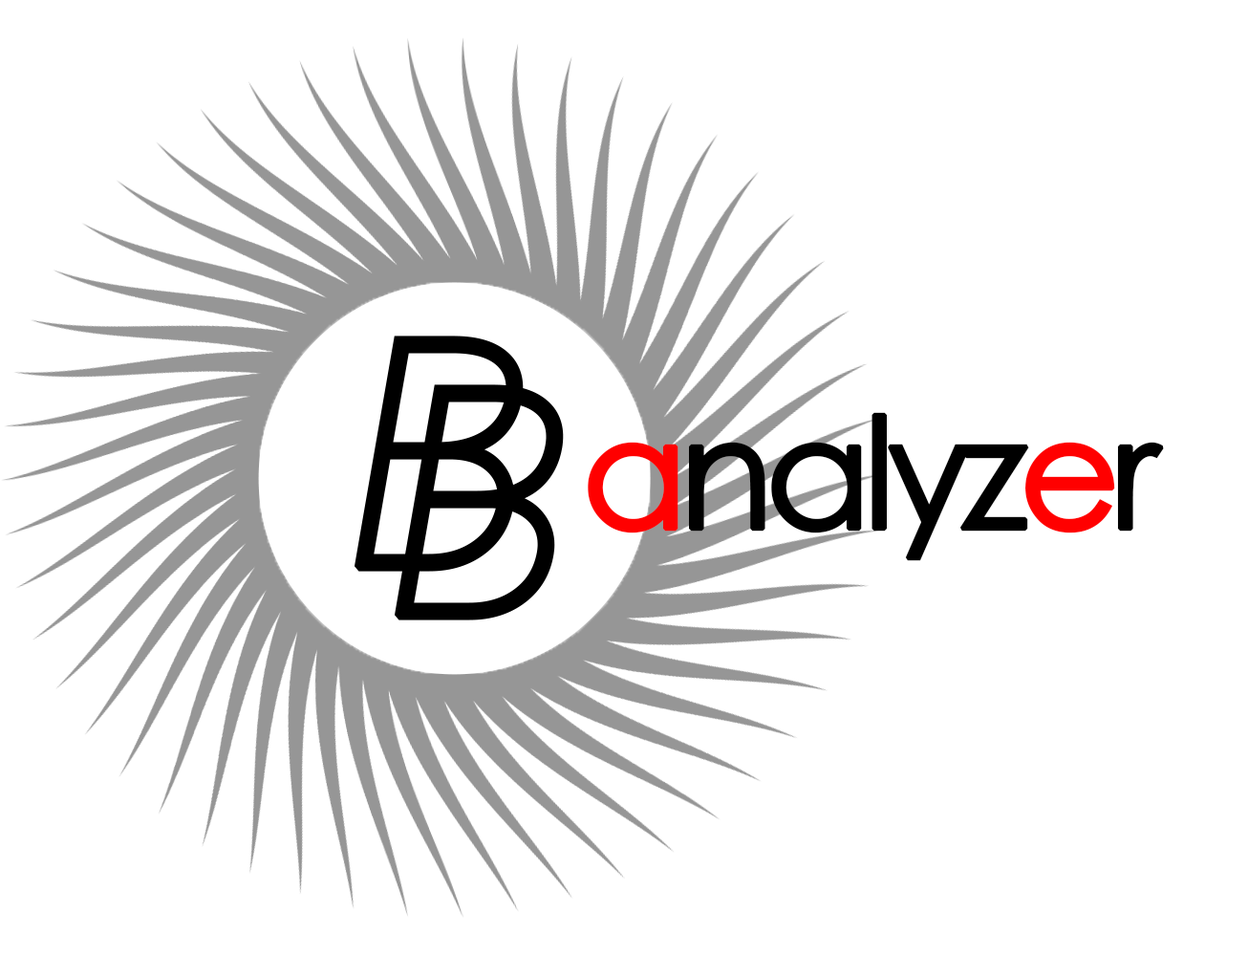
<style>
.page{position:relative;width:1248px;height:956px;background:#ffffff}
.page>*{position:absolute;margin:0}
.t1{font:155.3px "CenturyGothic";letter-spacing:-0.08em;color:#000000;font-weight:bold}
.t2{font:155.3px "CenturyGothic";letter-spacing:-0.08em;color:#ff0000;font-weight:bold}
</style>
<div class="page">
<p class="t1" style="left:588px;top:412px;width:576px;height:149px"><span class="t2">a</span>nalyz<span class="t2">e</span>r</p>
</div>
